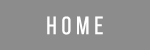
<style>
.page{position:relative;width:150px;height:50px;background:#8c8c8c}
.page>*{position:absolute;margin:0}
.t1{font:25px "BebasNeueRegular";letter-spacing:0.2em;color:#ffffff}
</style>
<div class="page">
<p class="t1" style="left:47px;top:16px;width:56px;height:19px">home</p>
</div>
